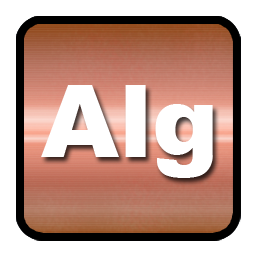
<style>
.page{position:relative;width:256px;height:256px;background:#ffffff}
.page>*{position:absolute;margin:0}
.t1{font:100px "Arial-Black";color:#ffffff}
</style>
<div class="page">
<p class="t1" style="left:41px;top:85px;width:172px;height:93px">Alg</p>
</div>
